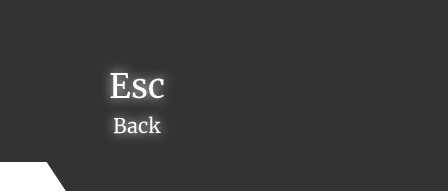
<style>
.page{position:relative;width:448px;height:195px;background:#333333}
.page>*{position:absolute;margin:0}
.t1{font:33.6px "Merriweather-Regular";color:#ffffff}
.t2{font:20px "Merriweather-Regular";color:#ffffff}
</style>
<div class="page">
<p class="t1" style="left:110px;top:73px;width:54px;height:26px">Esc</p>
<p class="t2" style="left:114px;top:116px;width:47px;height:18px">Back</p>
</div>
